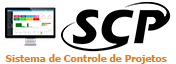
<style>
.page{position:relative;width:176px;height:64px;background:#ffffff}
.page>*{position:absolute;margin:0}
.t1{font:10px "Tahoma-Bold";color:#e67e22}
</style>
<div class="page">
<p class="t1" style="left:5px;top:54px;width:162px;height:10px">Sistema de Controle de Projetos</p>
</div>
